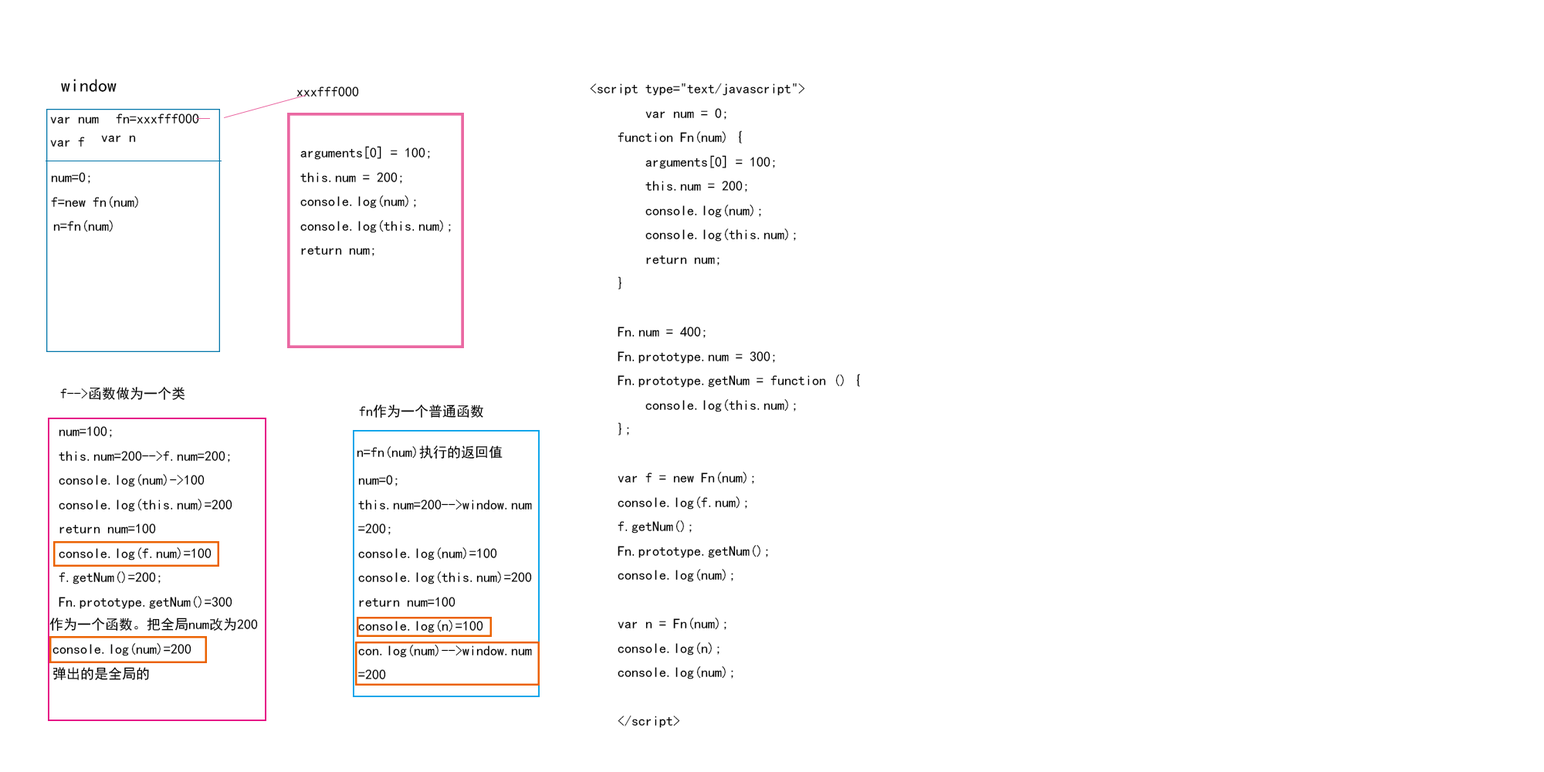
<style>
.page{position:relative;width:1544px;height:772px;background:#ffffff}
.page>*{position:absolute;margin:0}
.t1{font:18.5px "SimHei";color:#000000}
.t2{font:13.9px "SimHei";color:#000000}
</style>
<div class="page">
<p class="t1" style="left:61px;top:79px;width:56px;height:13px">window</p>
<p class="t2" style="left:297px;top:86px;width:62px;height:11px">xxxfff000</p>
<p class="t2" style="left:590px;top:83px;width:270px;height:645px">&lt;script type="text/javascript"&gt;<br>  var num = 0;<br>    function Fn(num) {<br>        arguments[0] = 100;<br>        this.num = 200;<br>        console.log(num);<br>        console.log(this.num);<br>        return num;<br>    }<br><br>    Fn.num = 400;<br>    Fn.prototype.num = 300;<br>    Fn.prototype.getNum = function () {<br>        console.log(this.num);<br>    };<br><br>    var f = new Fn(num);<br>    console.log(f.num);<br>    f.getNum();<br>    Fn.prototype.getNum();<br>    console.log(num);<br><br>    var n = Fn(num);<br>    console.log(n);<br>    console.log(num);<br><br> &lt;/script&gt;</p>
<p class="t2" style="left:116px;top:114px;width:83px;height:10px">fn=xxxfff000</p>
<p class="t2" style="left:50px;top:117px;width:49px;height:7px">var num</p>
<p class="t2" style="left:50px;top:137px;width:35px;height:10px">var f</p>
<p class="t2" style="left:101px;top:135px;width:35px;height:7px">var n</p>
<p class="t2" style="left:300px;top:146px;width:151px;height:110px">arguments[0] = 100;<br>        this.num = 200;<br>        console.log(num);<br>        console.log(this.num);<br>        return num;</p>
<p class="t2" style="left:51px;top:172px;width:87px;height:36px">num=0;<br>f=new fn(num)</p>
<p class="t2" style="left:53px;top:219px;width:60px;height:13px">n=fn(num)</p>
<p class="t2" style="left:60px;top:387px;width:125px;height:13px">f--&gt;函数做为一个类</p>
<p class="t2" style="left:359px;top:405px;width:124px;height:14px">fn作为一个普通函数</p>
<p class="t2" style="left:59px;top:426px;width:173px;height:183px">num=100;<br>this.num=200--&gt;f.num=200;<br>console.log(num)-&gt;100<br>console.log(this.num)=200<br>return num=100<br>console.log(f.num)=100<br>f.getNum()=200;<br>Fn.prototype.getNum()=300</p>
<p class="t2" style="left:357px;top:446px;width:146px;height:13px">n=fn(num)执行的返回值</p>
<p class="t2" style="left:358px;top:475px;width:174px;height:204px">num=0;<br>this.num=200--&gt;window.num<br>=200;<br>console.log(num)=100<br>console.log(this.num)=200<br>return num=100<br>console.log(n)=100<br>con.log(num)--&gt;window.num<br>=200</p>
<p class="t2" style="left:49px;top:618px;width:209px;height:14px">作为一个函数。把全局num改为200</p>
<p class="t2" style="left:53px;top:642px;width:138px;height:38px">console.log(num)=200<br>弹出的是全局的</p>
</div>
